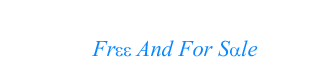
<style>
.page{position:relative;width:325px;height:69px;background:#ffffff}
.page>*{position:absolute;margin:0}
.t1{font:28px "Vijaya";color:#0887ff}
.t2{font:18.7px "SymbolMT";color:#0887ff}
</style>
<div class="page">
<p class="t1" style="left:92px;top:40px;width:166px;height:17px">Fr<span class="t2">ee </span>And For S<span class="t2">a</span>le</p>
</div>
